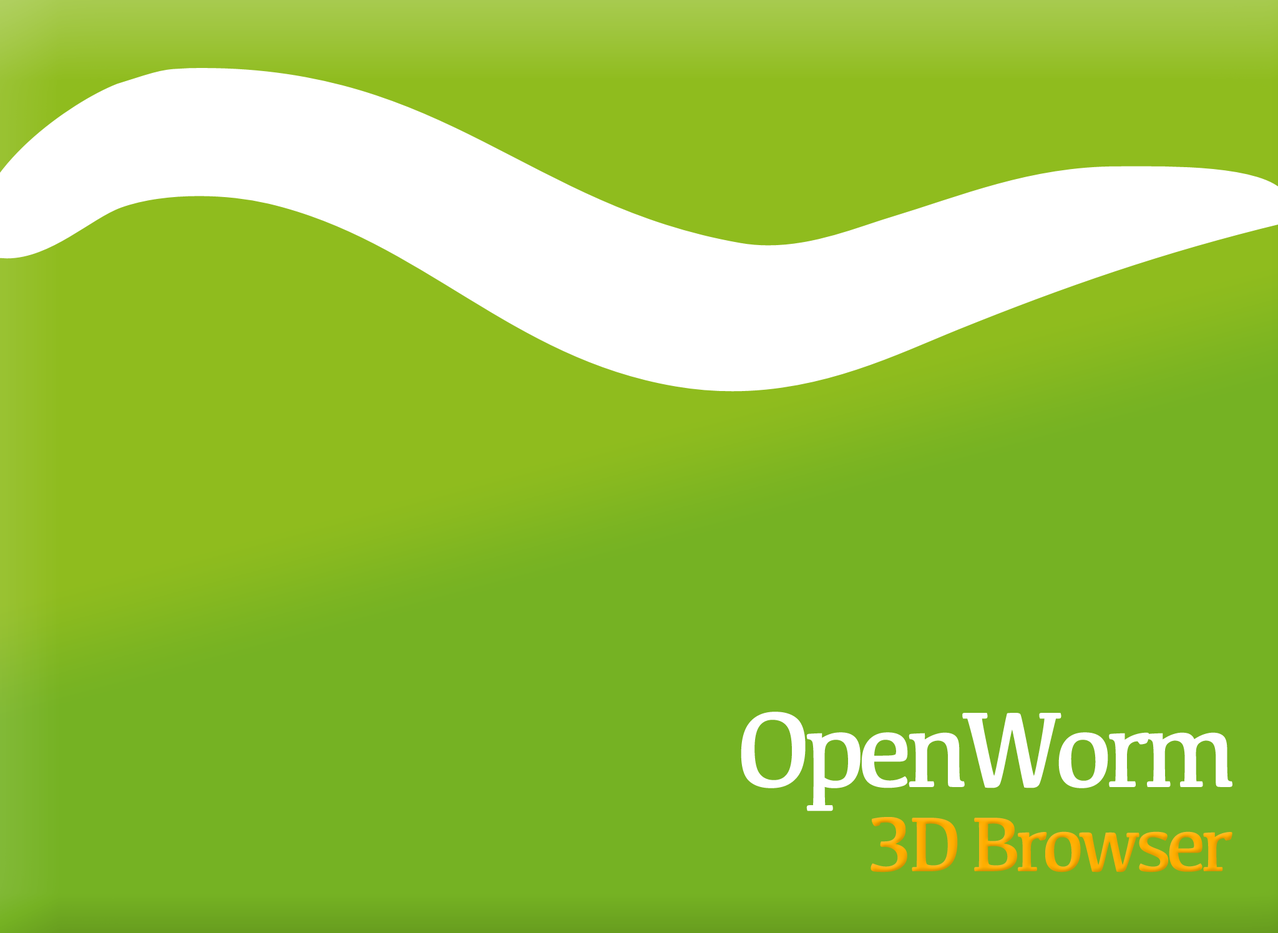
<style>
.page{position:relative;width:1278px;height:933px;background:#75b223}
.page>*{position:absolute;margin:0}
.t1{font:111.2px "Kefa-Regular";letter-spacing:-0.075em;color:#ffffff}
.t2{font:80px "Kefa-Regular";letter-spacing:-0.075em;color:#ffae00}
</style>
<div class="page">
<p class="t1" style="left:741px;top:712px;width:491px;height:100px">OpenWorm</p>
<p class="t2" style="left:870px;top:817px;width:362px;height:56px">3D Browser</p>
</div>
